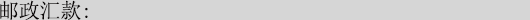
<style>
.page{position:relative;width:530px;height:20px;background:#d6d6d6}
.page>*{position:absolute;margin:0}
.t1{font:20.8px "SimSun";color:#090505}
</style>
<div class="page">
<p class="t1" style="left:0px;top:0px;width:88px;height:20px">邮政汇款:</p>
</div>
